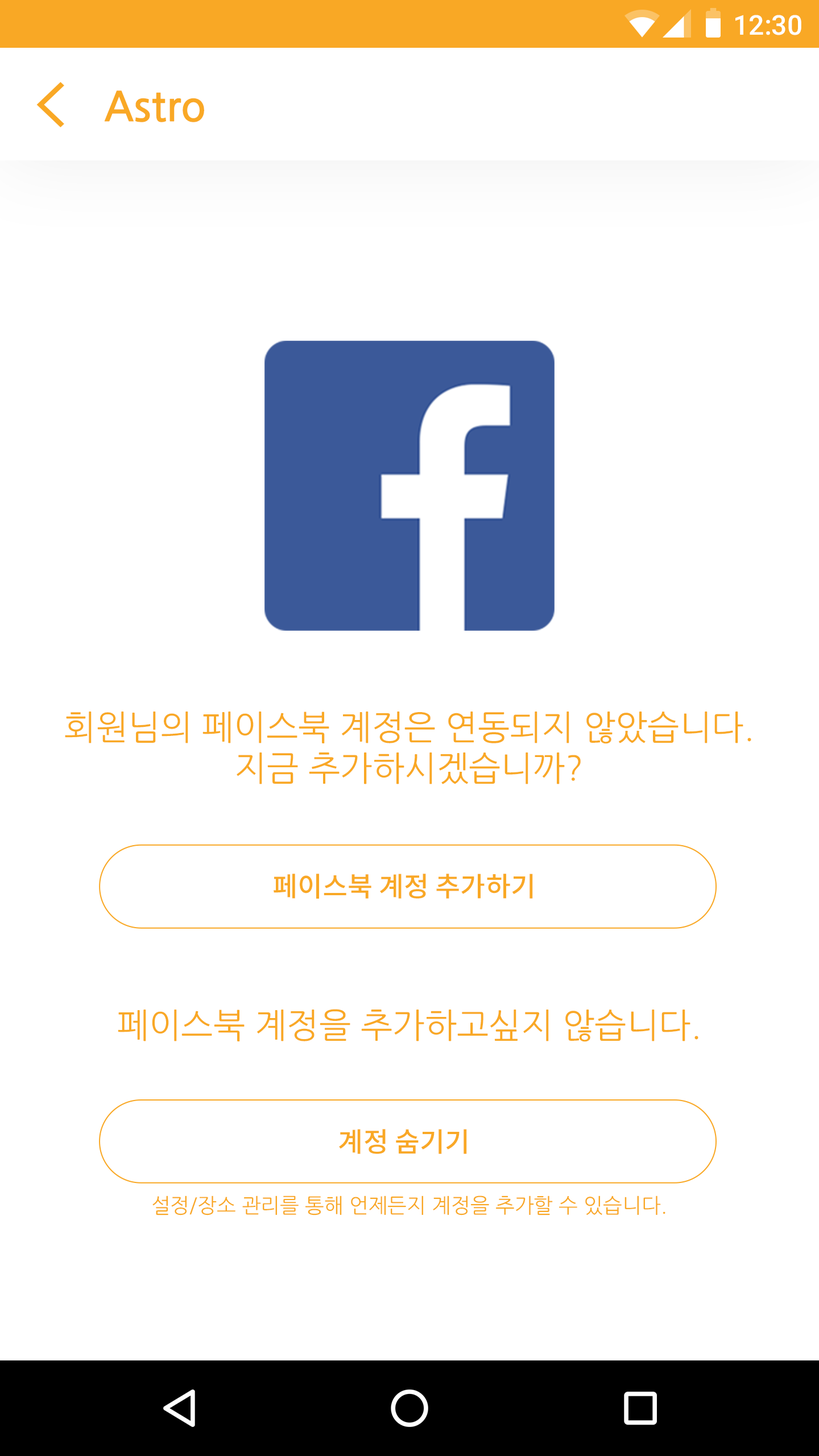
<style>
.page{position:relative;width:819px;height:1456px;background:#ffffff}
.page>*{position:absolute;margin:0}
.t1{font:27.3px "Roboto-Medium";color:#ffffff}
.t2{font:40.9px "NanumGothicBold";color:#f9a825}
.t3{font:34.1px "NanumGothic";color:#f9a825}
.t4{font:27.3px "NotoSansCJKkr-Medium";color:#f9a825}
.t5{font:27.2px "NotoSansCJKkr-Medium";color:#f9a825}
.t6{font:20.4px "NanumGothic";color:#f9a825}
</style>
<div class="page">
<p class="t1" style="left:735px;top:15px;width:66px;height:20px">12:30</p>
<p class="t2" style="left:104px;top:90px;width:100px;height:32px">Astro</p>
<p class="t3" style="left:65px;top:711px;width:686px;height:73px;text-align:center">회원님의 페이스북 계정은 연동되지 않았습니다.<br>지금 추가하시겠습니까?</p>
<p class="t4" style="left:274px;top:874px;width:259px;height:25px">페이스북 계정 추가하기</p>
<p class="t3" style="left:118px;top:1009px;width:580px;height:33px">페이스북 계정을 추가하고싶지 않습니다.</p>
<p class="t5" style="left:339px;top:1129px;width:128px;height:25px">계정 숨기기</p>
<p class="t6" style="left:152px;top:1195px;width:513px;height:20px">설정/장소 관리를 통해 언제든지 계정을 추가할 수 있습니다.</p>
</div>
